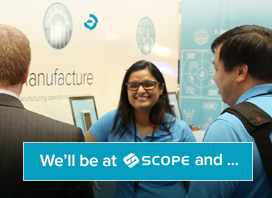
<style>
.page{position:relative;width:272px;height:198px}
.page>*{position:absolute;margin:0}
.t1{font:17px "ProximaNova-Semibold";letter-spacing:-0.012em;color:#ffffff}
</style>
<div class="page">
<p class="t1" style="left:40px;top:154px;width:77px;height:13px">We’ll be at</p>
<p class="t1" style="left:195px;top:153px;width:43px;height:13px">and ...</p>
</div>
